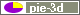
<style>
.page{position:relative;width:80px;height:15px;background:#898e79}
.page>*{position:absolute;margin:0}
.t1{font:12px "ArialRoundedMTBold";letter-spacing:0.05em;color:#ffffff;scale:0.83 1}
</style>
<div class="page">
<p class="t1" style="left:30px;top:2px;width:33px;height:13px">pie-3d</p>
</div>
